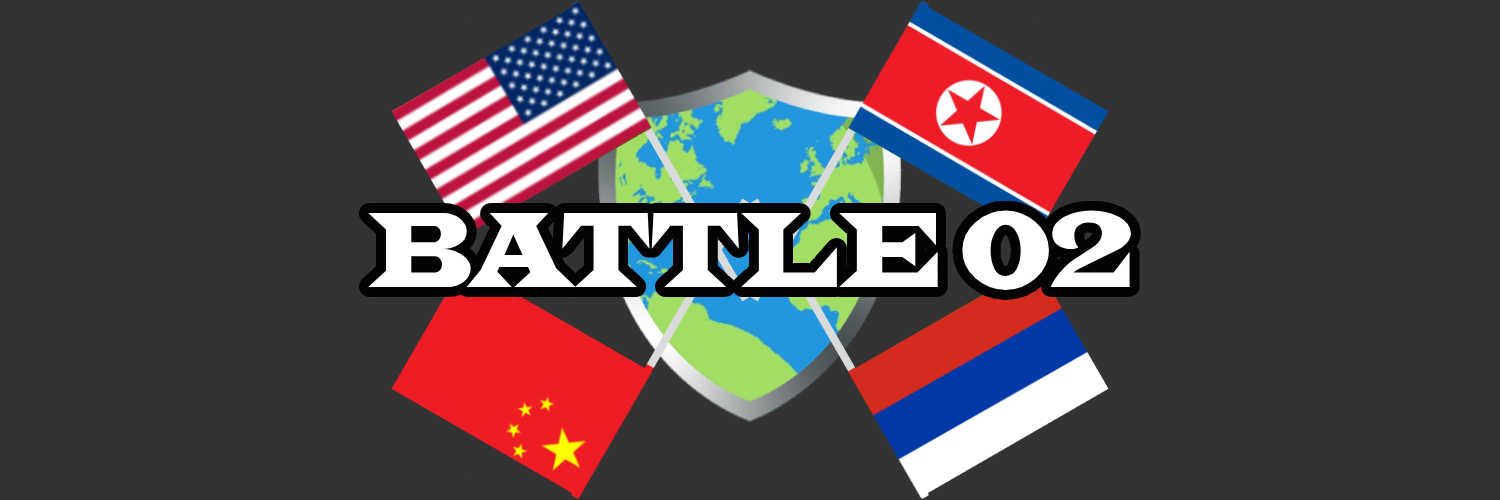
<style>
.page{position:relative;width:1500px;height:500px;background:#333333}
.page>*{position:absolute;margin:0}
.t1{font:111px "Indubitably";color:#ffffff}
</style>
<div class="page">
<p class="t1" style="left:368px;top:210px;width:763px;height:80px">BATTLE 02</p>
</div>
